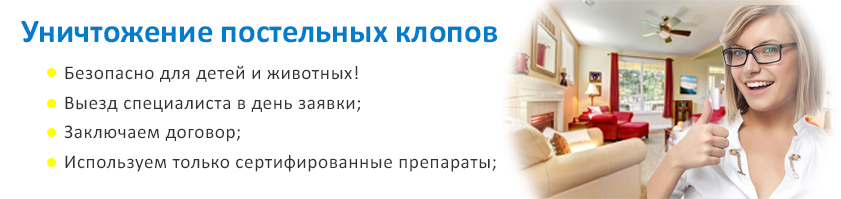
<style>
.page{position:relative;width:841px;height:199px;background:#ffffff}
.page>*{position:absolute;margin:0}
.t1{font:33.1px "Calibri-Bold";color:#007dcc}
.t2{font:19.4px/29.7px "Calibri";letter-spacing:0.025em;color:#333333}
</style>
<div class="page">
<p class="t1" style="left:21px;top:21px;width:477px;height:22px">Уничтожение постельных клопов</p>
<p class="t2" style="left:64px;top:65px;width:432px;height:107px">Безопасно для детей и животных! <br>Выезд специалиста в день заявки;<br>Заключаем договор;<br>Используем только сертифированные препараты;</p>
</div>
